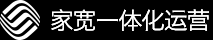
<style>
.page{position:relative;width:213px;height:40px;background:#000000}
.page>*{position:absolute;margin:0}
.t1{font:23.6px "HiraginoSansGB-W3";letter-spacing:-0.05em;color:#ffffff;text-transform:uppercase}
</style>
<div class="page">
<p class="t1" style="left:51px;top:9px;width:158px;height:22px">家宽一体化运营</p>
<p class="t1" style="left:51px;top:9px;width:158px;height:22px">家宽一体化运营</p>
</div>
